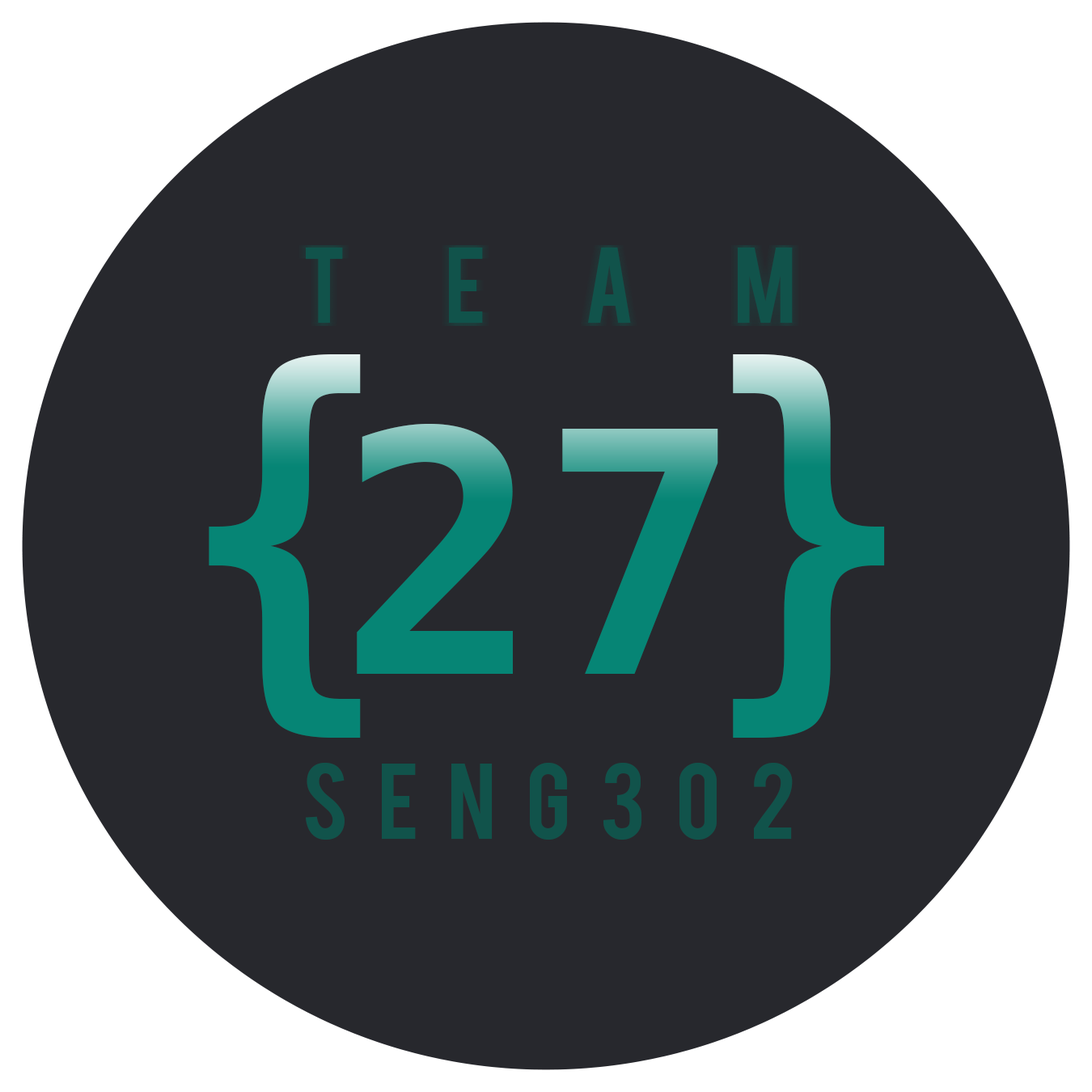
<style>
.page{position:relative;width:1092px;height:1092px;background:#27282d}
.page>*{position:absolute;margin:0}
.t1{font:84.5px "Bebas";color:#11534b;scale:1.03 1}
.t2{font:416px "Menlo-Bold";letter-spacing:0.14em;color:#068575;scale:0.85 1}
.t3{font:336.7px "Menlo-Bold";color:#068575}
</style>
<div class="page">
<p class="t1" style="left:306px;top:248px;width:487px;height:75px">TEAM</p>
<p class="t2" style="left:209px;top:354px;width:676px;height:384px">{ }</p>
<p class="t3" style="left:357px;top:424px;width:361px;height:250px">27</p>
<p class="t1" style="left:306px;top:763px;width:487px;height:77px">SENG302</p>
</div>
